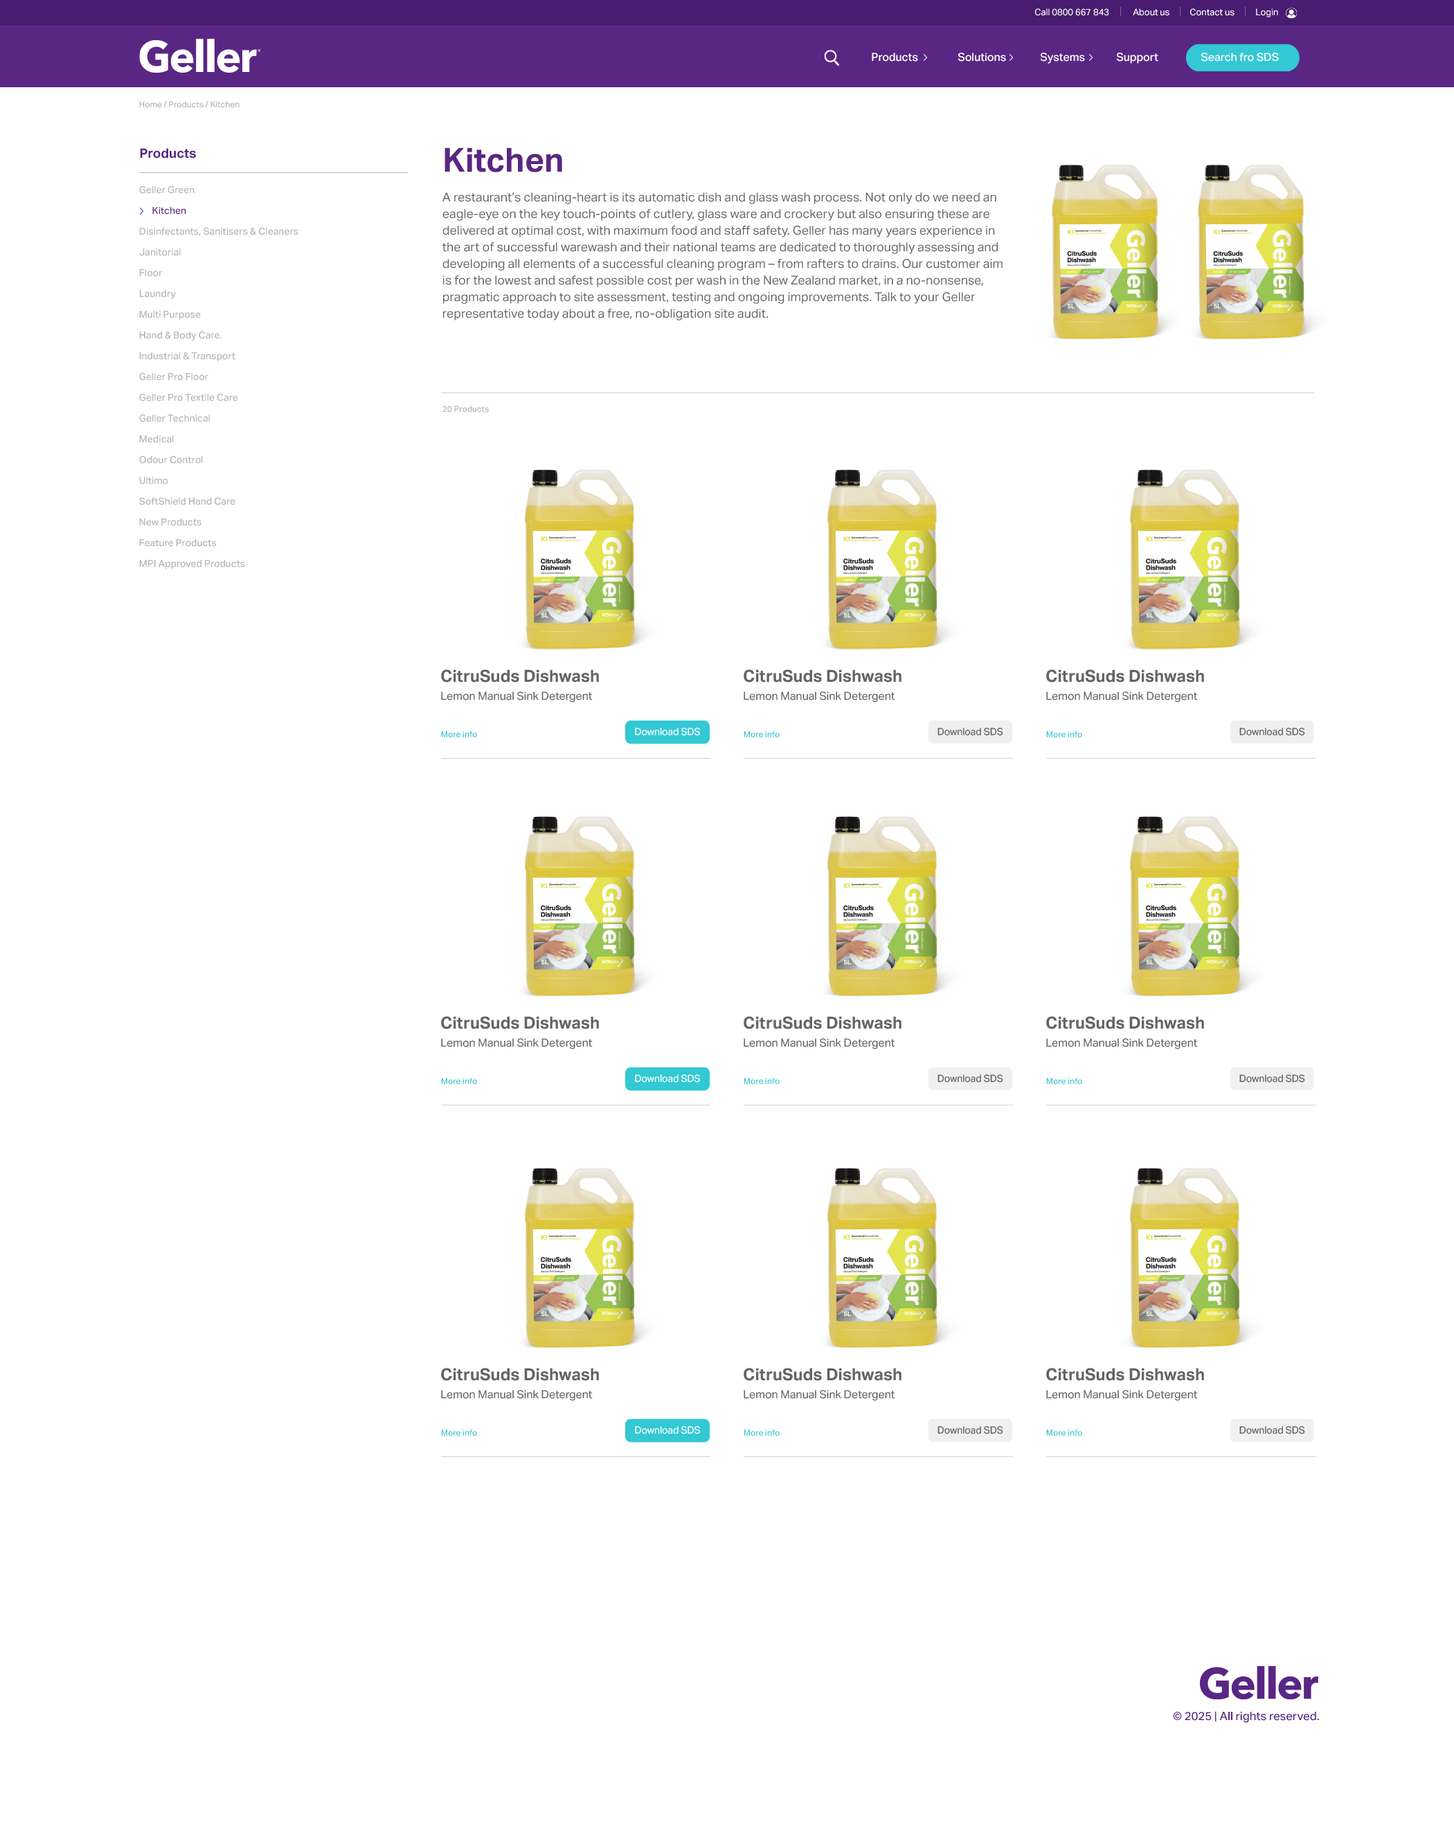
<style>
.page{position:relative;width:1454px;height:1826px;background:#ffffff}
.page>*{position:absolute;margin:0}
.t1{font:9px "AktivGrotesk-Regular";color:#fefefe}
.t2{font:11.1px "AktivGrotesk-Medium";color:#fefefe}
.t3{font:8.3px "AktivGrotesk-Medium";color:#b4b4b4}
.t4{font:13.2px "AktivGrotesk-Bold";color:#5a2684}
.t5{font:33.2px "AktivGrotesk-Bold";color:#5a2684}
.t6{font:9.7px/20.8px "AktivGrotesk-Medium";color:#b4b4b4}
.t7{font:9.7px/20.8px "AktivGrotesk-Medium";color:#5a2684}
.t8{font:12.5px/16.6px "AktivGrotesk-Regular";color:#646464}
.t9{font:8.3px "AktivGrotesk-Medium";color:#32c8d4}
.t10{font:11.5px "AktivGrotesk-Medium";color:#5a2684}
</style>
<div class="page">
<p class="t1" style="left:1035px;top:8px;width:73px;height:8px">Call 0800 667 843</p>
<p class="t1" style="left:1133px;top:8px;width:36px;height:8px">About us</p>
<p class="t1" style="left:1190px;top:8px;width:44px;height:8px">Contact us</p>
<p class="t1" style="left:1256px;top:8px;width:22px;height:9px">Login</p>
<p class="t2" style="left:872px;top:53px;width:46px;height:9px">Products</p>
<p class="t2" style="left:957px;top:53px;width:49px;height:9px">Solutions</p>
<p class="t2" style="left:1040px;top:53px;width:45px;height:11px">Systems</p>
<p class="t2" style="left:1116px;top:53px;width:42px;height:11px">Support</p>
<p class="t2" style="left:1200px;top:53px;width:79px;height:9px">Search fro SDS</p>
<p class="t3" style="left:139px;top:101px;width:101px;height:7px">Home / Products / Kitchen</p>
<p class="t4" style="left:140px;top:148px;width:56px;height:11px">Products</p>
<p class="t5" style="left:444px;top:147px;width:118px;height:25px">Kitchen</p>
<p class="t6" style="left:139px;top:186px;width:159px;height:383px">Geller Green<br><span class="t7">      Kitchen<br></span>Disinfectants, Sanitisers &amp; Cleaners<br>Janitorial<br>Floor<br>Laundry<br>Multi Purpose<br>Hand &amp; Body Care.<br>Industrial &amp; Transport<br>Geller Pro Floor<br>Geller Pro Textile Care<br>Geller Technical<br>Medical<br>Odour Control<br>Ultimo<br>SoftShield Hand Care<br>New Products<br>Feature Products<br>MPI Approved Products</p>
<p class="t8" style="left:442px;top:192px;width:560px;height:129px">A restaurant’s cleaning-heart is its automatic dish and glass wash process. Not only do we need an eagle-eye on the key touch-points of cutlery, glass ware and crockery but also ensuring these are delivered at optimal cost, with maximum food and staff safety. Geller has many years experience in the art of successful warewash and their national teams are dedicated to thoroughly assessing and developing all elements of a successful cleaning program – from rafters to drains. Our customer aim is for the lowest and safest possible cost per wash in the New Zealand market, in a no-nonsense, pragmatic approach to site assessment, testing and ongoing improvements. Talk to your Geller representative today about a free, no-obligation site audit.</p>
<p class="t3" style="left:442px;top:406px;width:47px;height:7px">20 Products</p>
<p class="t9" style="left:441px;top:731px;width:36px;height:7px">More info</p>
<p class="t9" style="left:744px;top:731px;width:36px;height:7px">More info</p>
<p class="t9" style="left:1046px;top:731px;width:36px;height:7px">More info</p>
<p class="t9" style="left:441px;top:1078px;width:36px;height:7px">More info</p>
<p class="t9" style="left:744px;top:1078px;width:36px;height:7px">More info</p>
<p class="t9" style="left:1046px;top:1078px;width:36px;height:7px">More info</p>
<p class="t9" style="left:441px;top:1430px;width:36px;height:7px">More info</p>
<p class="t9" style="left:744px;top:1430px;width:36px;height:7px">More info</p>
<p class="t9" style="left:1046px;top:1430px;width:36px;height:7px">More info</p>
<p class="t10" style="left:1173px;top:1711px;width:146px;height:12px">© 2025 | All rights reserved.</p>
</div>
